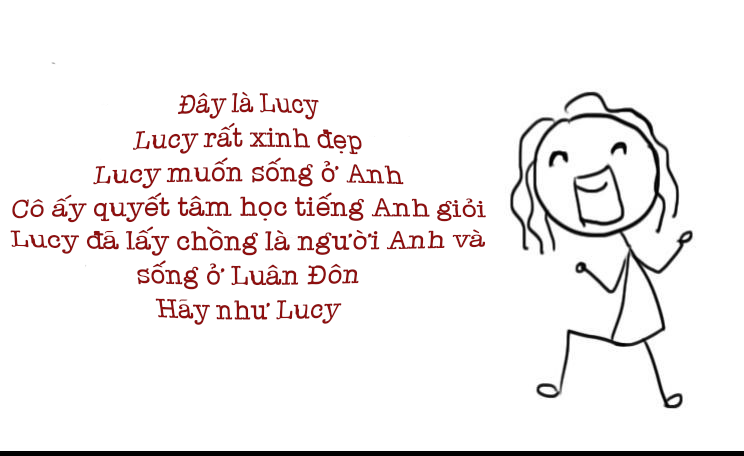
<style>
.page{position:relative;width:744px;height:456px;background:#ffffff}
.page>*{position:absolute;margin:0}
.t1{font:24px "AmericanTypewriter";color:#8e0f0f}
</style>
<div class="page">
<p class="t1" style="left:10px;top:91px;width:476px;height:234px;text-align:center">Đây là Lucy<br>Lucy rất xinh đẹp<br>Lucy muốn sống ở Anh<br>Cô ấy quyết tâm học tiếng Anh giỏi<br>Lucy đã lấy chồng là người Anh và sống ở Luân Đôn<br>Hãy như Lucy</p>
</div>
